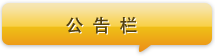
<style>
.page{position:relative;width:215px;height:56px}
.page>*{position:absolute;margin:0}
.t1{font:18px "AdobeHeitiStd-Regular";color:#544210}
</style>
<div class="page">
<p class="t1" style="left:66px;top:16px;width:71px;height:18px">公 告 栏</p>
</div>
